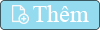
<style>
.page{position:relative;width:100px;height:30px;background:#94dbf0}
.page>*{position:absolute;margin:0}
.t1{font:24px "TimesNewRomanPSMT";color:#ffffff}
</style>
<div class="page">
<p class="t1" style="left:33px;top:5px;width:56px;height:17px">Thêm</p>
</div>
